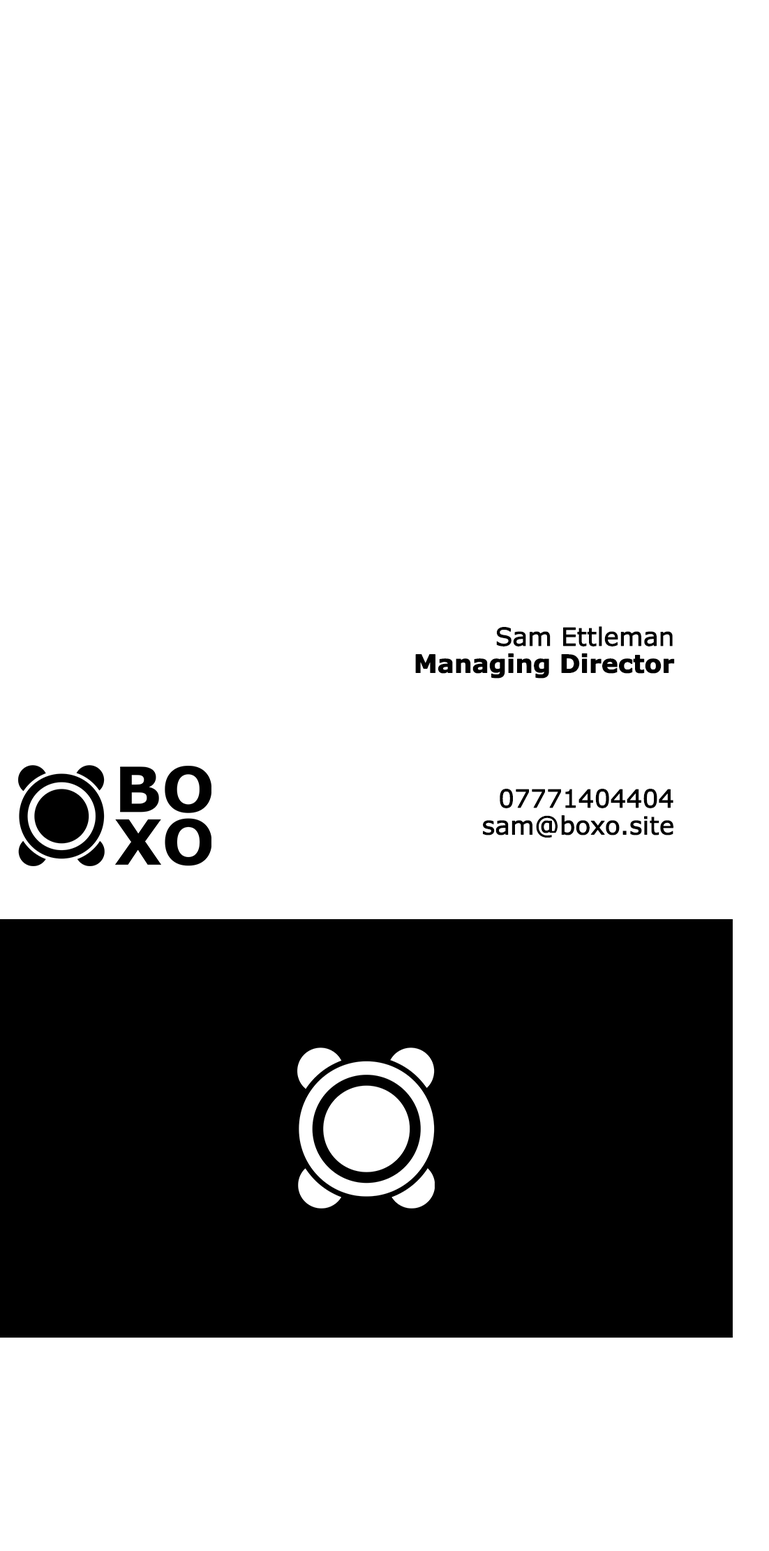
<style>
.page{position:relative;width:769px;height:1551px;background:#ffffff}
.page>*{position:absolute;margin:0}
.t1{font:24.9px/27px "Verdana";letter-spacing:-0.02em;color:#000000;font-weight:bold}
.t2{font:24.9px/27px "Verdana-Bold";letter-spacing:-0.02em;color:#000000;font-weight:bold}
</style>
<div class="page">
<p class="t1" style="left:415px;top:626px;width:260px;height:212px;text-align:right">Sam Ettleman<br><span class="t2">Managing Director<br><br><br><br><br></span>07771404404<br>sam@boxo.site</p>
</div>
